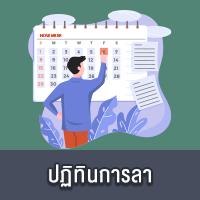
<style>
.page{position:relative;width:200px;height:200px;background:#538576}
.page>*{position:absolute;margin:0}
.t1{font:29.2px "DBHelvethaicaX-57Cond";letter-spacing:0.01em;color:#ffffff;font-weight:bold}
</style>
<div class="page">
<p class="t1" style="left:49px;top:164px;width:102px;height:23px">ปฏิทินการลา</p>
</div>
